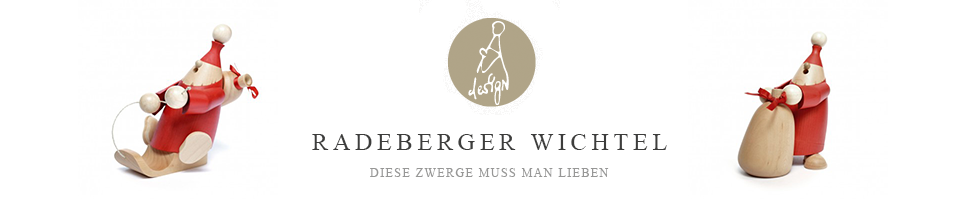
<style>
.page{position:relative;width:980px;height:200px;background:#ffffff}
.page>*{position:absolute;margin:0}
.t1{font:24px "TimesNewRomanPSMT";letter-spacing:0.2em;color:#3d3d3c}
.t2{font:12px "TimesNewRomanPSMT";letter-spacing:0.12em;color:#979796}
</style>
<div class="page">
<p class="t1" style="left:312px;top:134px;width:355px;height:16px">RADEBERGER WICHTEL</p>
<p class="t2" style="left:370px;top:168px;width:239px;height:9px">DIESE ZWERGE MUSS MAN LIEBEN</p>
</div>
